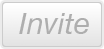
<style>
.page{position:relative;width:104px;height:49px}
.page>*{position:absolute;margin:0}
.t1{font:30px "HelveticaNeue-Italic";color:#aeaeae}
</style>
<div class="page">
<p class="t1" style="left:19px;top:13px;width:70px;height:21px">Invite</p>
</div>
